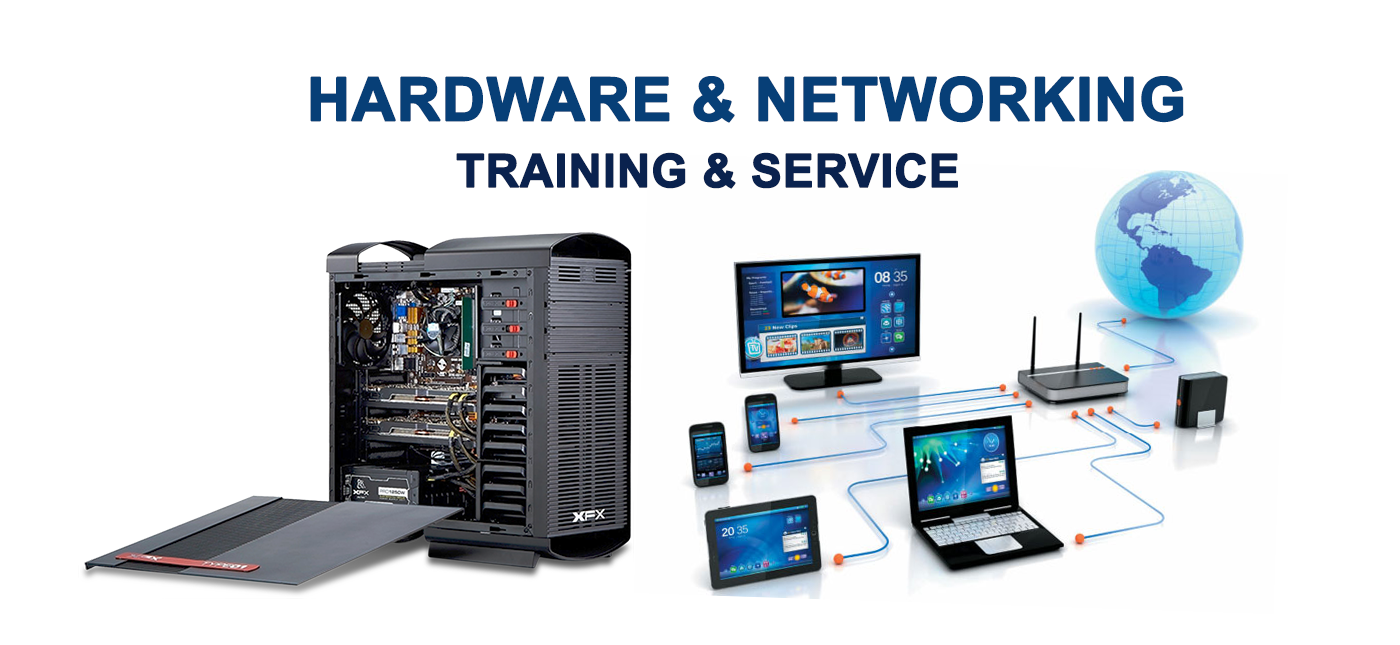
<style>
.page{position:relative;width:1400px;height:645px;background:#ffffff}
.page>*{position:absolute;margin:0}
.t1{font:60px "Arial-BoldMT";color:#073f77;text-transform:uppercase;font-weight:bold}
.t2{font:46px "Arial-BoldMT";color:#0a224e;text-transform:uppercase;font-weight:bold}
</style>
<div class="page">
<p class="t1" style="left:310px;top:76px;width:874px;height:47px">hardware &amp; Networking</p>
<p class="t2" style="left:456px;top:152px;width:502px;height:37px">Training &amp; Service</p>
</div>
